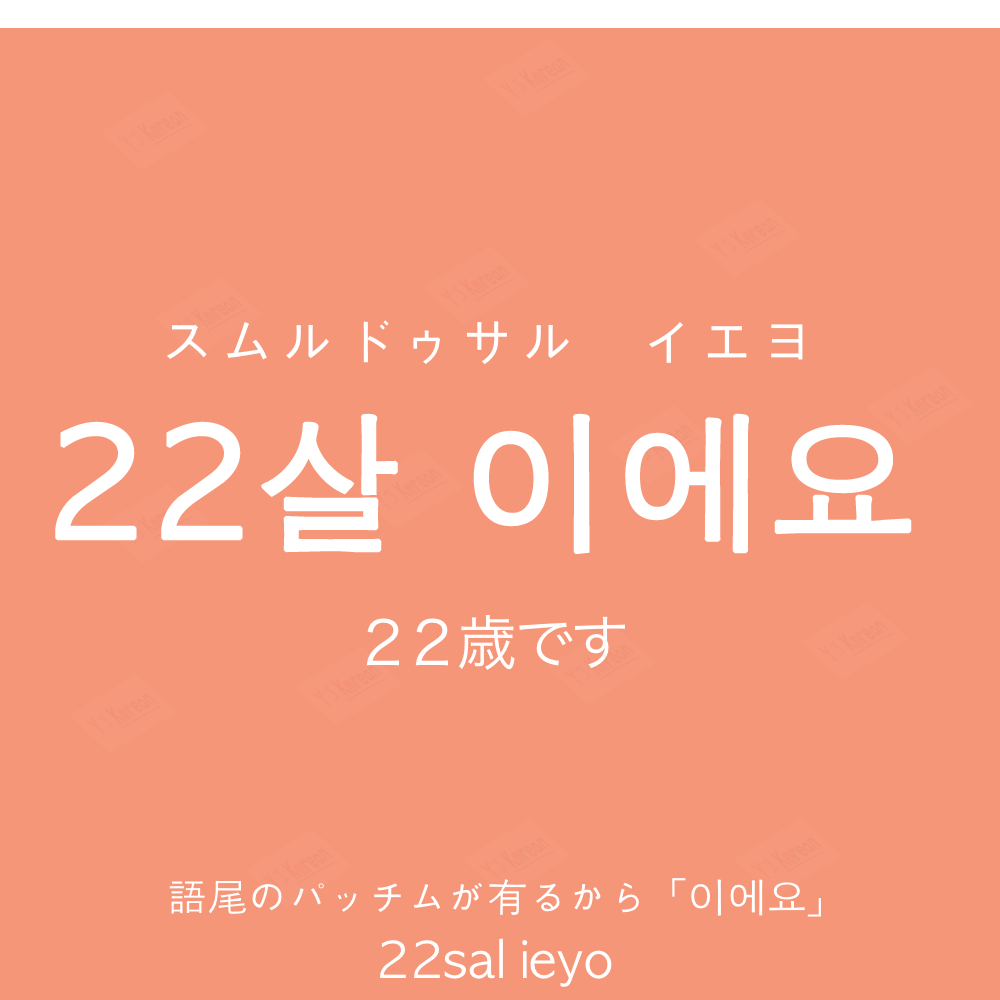
<style>
.page{position:relative;width:1000px;height:1000px;background:#f69679}
.page>*{position:absolute;margin:0}
.t1{font:60px "AppleGothic";color:#ffffff}
.t2{font:150px "AppleGothic";color:#ffffff;font-weight:bold}
.t3{font:60px "HiraKakuProN-W3";color:#ffffff}
.t4{font:40px "AppleGothic";color:#ffffff}
.t5{font:50px "AppleGothic";color:#ffffff}
</style>
<div class="page">
<p class="t1" style="left:167px;top:320px;width:636px;height:45px">スムルドゥサル　イエヨ</p>
<p class="t2" style="left:55px;top:413px;width:857px;height:142px">22살 이에요</p>
<p class="t3" style="left:366px;top:615px;width:259px;height:55px">２２歳です</p>
<p class="t4" style="left:169px;top:878px;width:652px;height:39px">語尾のパッチムが有るから「이에요」</p>
<p class="t5" style="left:380px;top:938px;width:232px;height:49px">22sal ieyo</p>
</div>
